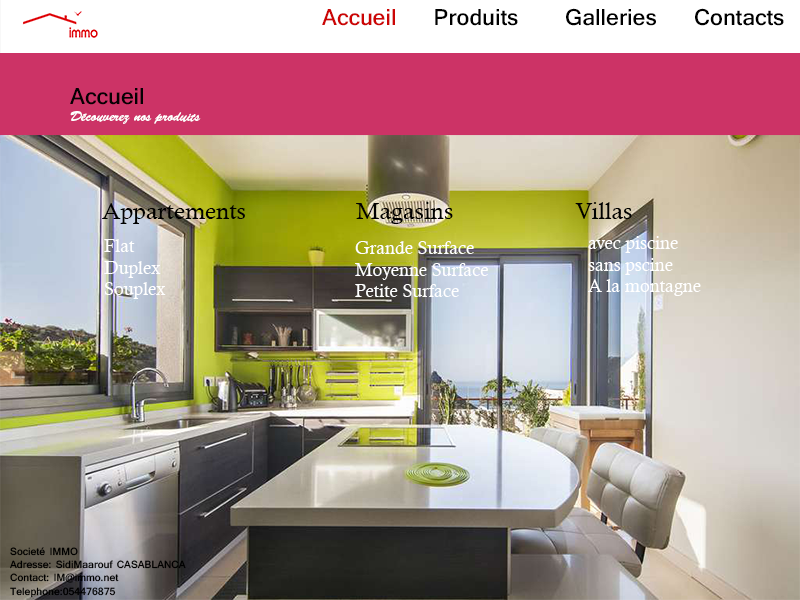
<style>
.page{position:relative;width:800px;height:600px}
.page>*{position:absolute;margin:0}
.t1{font:24px "Shruti-Bold";color:#000000}
.t2{font:24px "Shruti-Bold";color:#cc0505}
.t3{font:14px "BrushScriptStd";color:#ffffff}
.t4{font:24px "Shruti-Bold";color:#050103}
.t5{font:24px "CalistoMT";color:#000000}
.t6{font:18px "CalistoMT";color:#ffffff}
.t7{font:11px "Shruti-Bold";color:#000000}
</style>
<div class="page">
<p class="t1" style="left:322px;top:8px;width:462px;height:18px"><span class="t2">         Accueil    </span>Produits     Galleries    Contacts</p>
<p class="t3" style="left:70px;top:88px;width:131px;height:36px"><span class="t4">Accueil<br></span>Découverez nos produits</p>
<p class="t5" style="left:102px;top:202px;width:530px;height:22px">Appartements                  Magasins                    Villas</p>
<p class="t6" style="left:104px;top:239px;width:62px;height:60px">Flat<br>Duplex<br>Souplex</p>
<p class="t6" style="left:355px;top:241px;width:133px;height:56px">Grande Surface<br>Moyenne Surface<br>Petite Surface</p>
<p class="t6" style="left:588px;top:236px;width:113px;height:60px">avec piscine<br>sans pscine<br>A la montagne</p>
<p class="t7" style="left:10px;top:547px;width:176px;height:51px">Societé IMMO<br>Adresse: SidiMaarouf CASABLANCA<br>Contact: IM@immo.net<br>Telephone:054476875</p>
</div>
